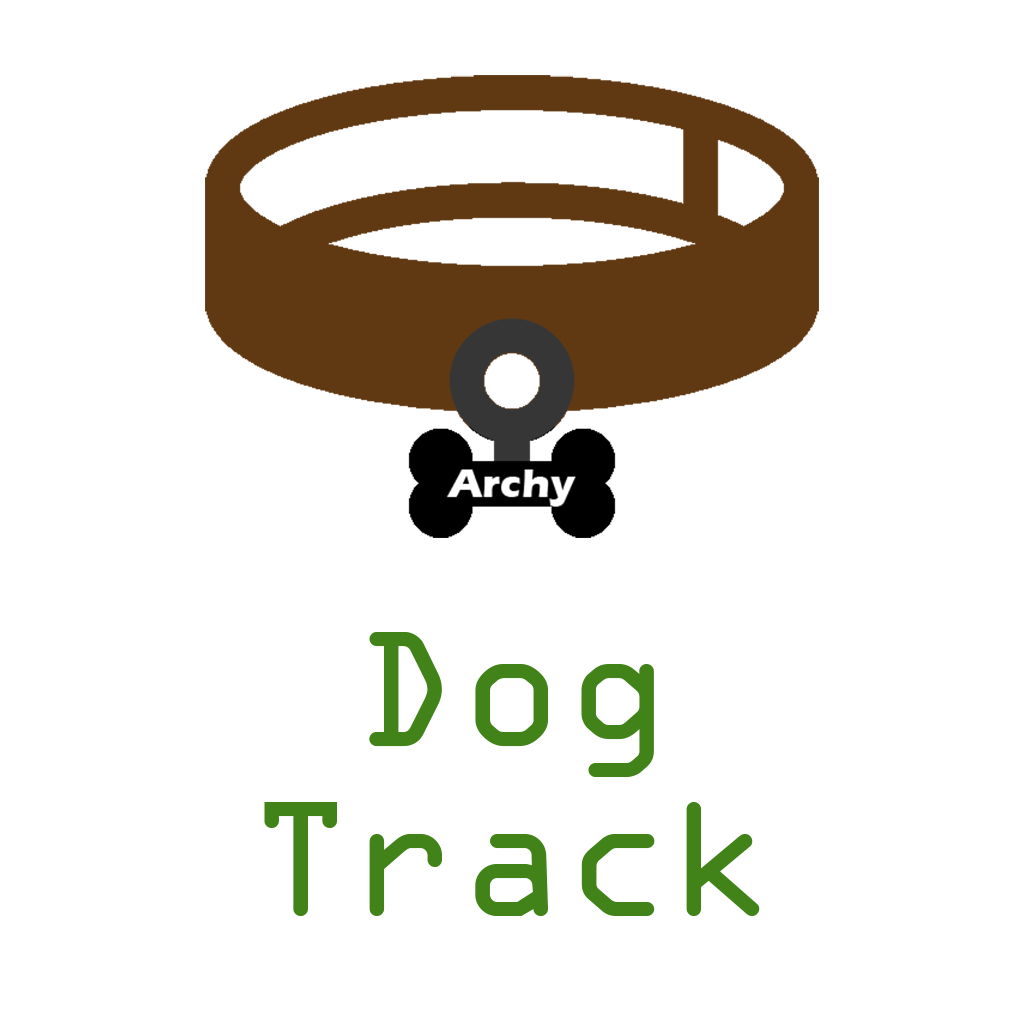
<style>
.page{position:relative;width:1024px;height:1024px;background:#ffffff}
.page>*{position:absolute;margin:0}
.t1{font:300px/170px "OCRAExtended";color:#418219}
</style>
<div class="page">
<p class="t1" style="left:264px;top:632px;width:496px;height:284px;text-align:center">Dog<br>Track</p>
</div>
